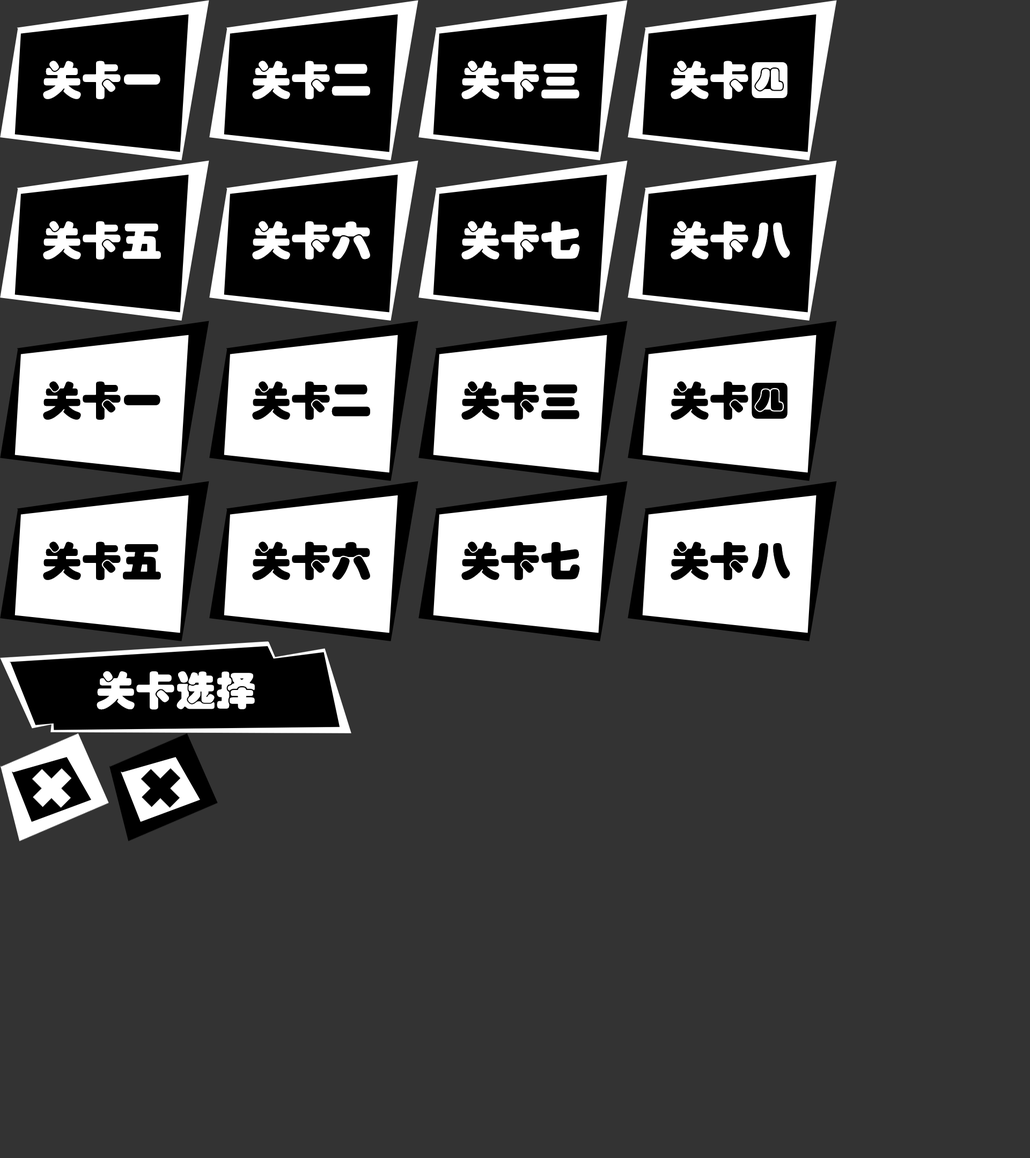
<style>
.page{position:relative;width:1030px;height:1158px;background:#333333}
.page>*{position:absolute;margin:0}
.t1{font:40.2px "STHupo";color:#ffffff}
.t2{font:40.2px "STHupo";color:#000000}
</style>
<div class="page">
<p class="t1" style="left:43px;top:61px;width:117px;height:38px">关卡一</p>
<p class="t1" style="left:252px;top:61px;width:118px;height:38px">关卡二</p>
<p class="t1" style="left:461px;top:61px;width:118px;height:38px">关卡三</p>
<p class="t1" style="left:670px;top:61px;width:117px;height:38px">关卡四</p>
<p class="t1" style="left:43px;top:221px;width:118px;height:39px">关卡五</p>
<p class="t1" style="left:252px;top:221px;width:118px;height:39px">关卡六</p>
<p class="t1" style="left:461px;top:221px;width:119px;height:39px">关卡七</p>
<p class="t1" style="left:670px;top:221px;width:120px;height:39px">关卡八</p>
<p class="t2" style="left:43px;top:381px;width:117px;height:39px">关卡一</p>
<p class="t2" style="left:252px;top:381px;width:118px;height:39px">关卡二</p>
<p class="t2" style="left:461px;top:381px;width:118px;height:39px">关卡三</p>
<p class="t2" style="left:670px;top:381px;width:117px;height:39px">关卡四</p>
<p class="t2" style="left:43px;top:542px;width:118px;height:38px">关卡五</p>
<p class="t2" style="left:252px;top:542px;width:118px;height:38px">关卡六</p>
<p class="t2" style="left:461px;top:542px;width:119px;height:38px">关卡七</p>
<p class="t2" style="left:670px;top:542px;width:120px;height:38px">关卡八</p>
<p class="t1" style="left:97px;top:671px;width:158px;height:39px">关卡选择</p>
</div>
